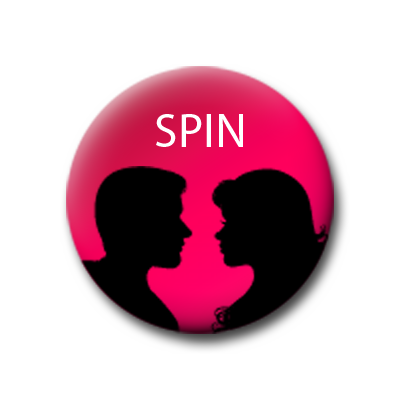
<style>
.page{position:relative;width:400px;height:400px;background:#ffffff}
.page>*{position:absolute;margin:0}
.t1{font:48px "MyriadPro-Regular";color:#ffffff}
</style>
<div class="page">
<p class="t1" style="left:156px;top:114px;width:87px;height:33px">SPIN</p>
</div>
